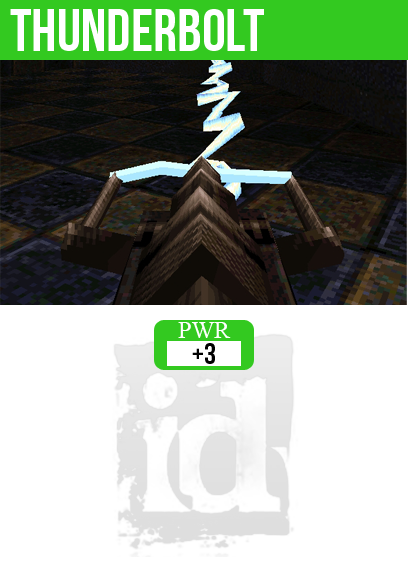
<style>
.page{position:relative;width:408px;height:585px;background:#ffffff}
.page>*{position:absolute;margin:0}
.t1{font:60px "BebasNeue";color:#ffffff}
.t2{font:24px "TimesNewRomanPSMT";color:#ffffff}
.t3{font:30px "BebasNeue";color:#000000}
</style>
<div class="page">
<p class="t1" style="left:10px;top:9px;width:254px;height:42px">thunderbolt</p>
<p class="t2" style="left:178px;top:322px;width:53px;height:16px">PWR</p>
<p class="t3" style="left:192px;top:343px;width:23px;height:21px">+3</p>
</div>
